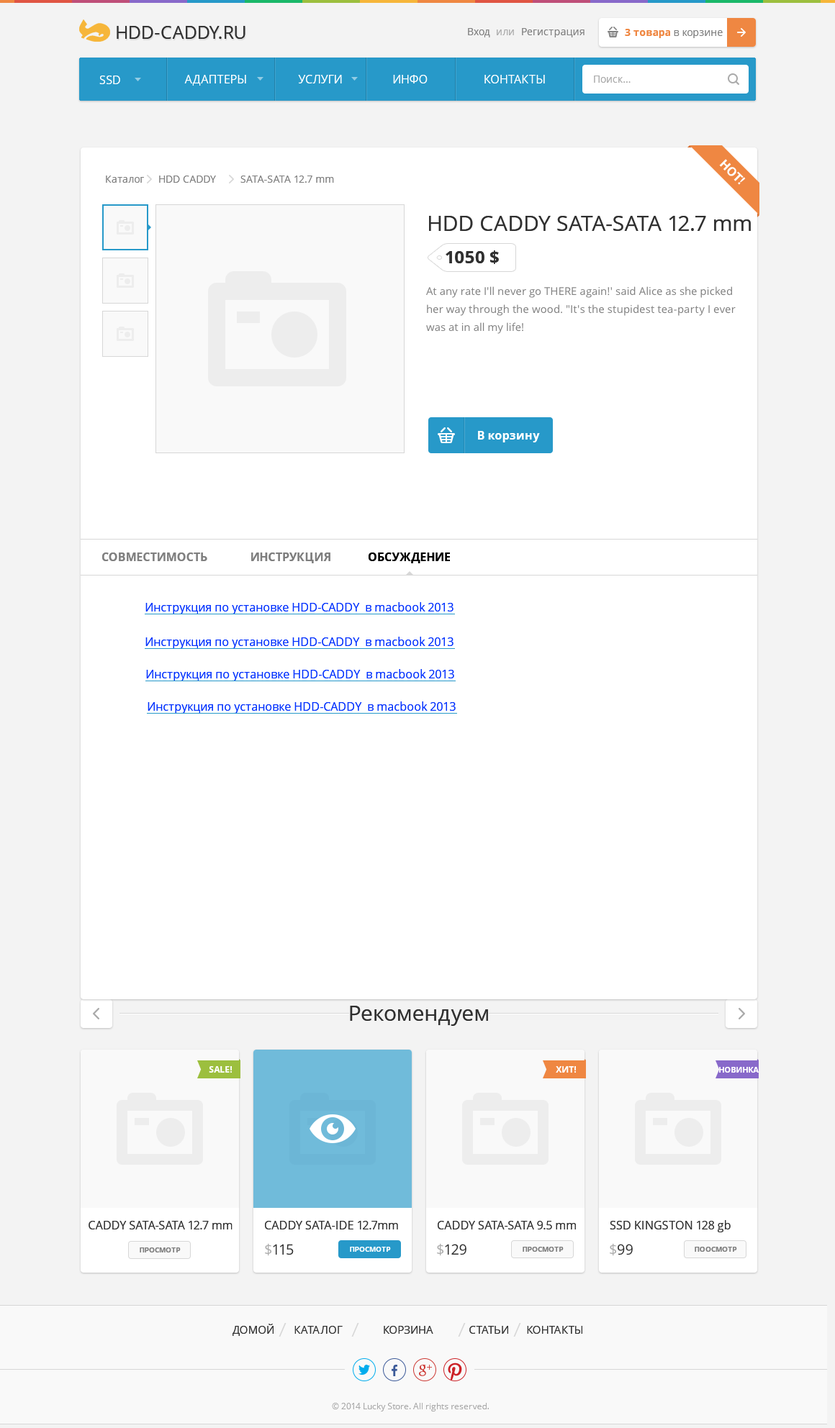
<style>
.page{position:relative;width:835px;height:1428px;background:#ffffff}
.page>*{position:absolute;margin:0}
.t1{font:18px "OpenSans";color:#303030}
.t2{font:10.1px "OpenSans";color:#808080}
.t3{font:10.1px "OpenSans";color:#aaaaaa}
.t4{font:10.1px "OpenSans-Bold";color:#ef8742}
.t5{font:11.5px "OpenSans";color:#ffffff;text-transform:uppercase}
.t6{font:12.2px "HelveticaNeue-Bold";color:#ffffff;text-transform:uppercase}
.t7{font:21.6px "OpenSans";color:#303030}
.t8{font:17.3px "OpenSans-Bold";color:#303030}
.t9{font:10.8px/18px "OpenSans";color:#808080}
.t10{font:11.5px "OpenSans-Bold";color:#ffffff}
.t11{font:11.5px "OpenSans-Bold";color:#808080;text-transform:uppercase}
.t12{font:11.5px "OpenSans-Bold";color:#7e7e7e;text-transform:uppercase}
.t13{font:11.5px "OpenSans-Bold";color:#000000;text-transform:uppercase}
.t14{font:11.5px "OpenSans";color:#0030fe}
.t15{font:8.6px "OpenSans-Bold";color:#ffffff;text-transform:uppercase}
.t16{font:7.9px "OpenSans-Bold";color:#ffffff;text-transform:uppercase}
.t17{font:11.5px "OpenSans";color:#303030}
.t18{font:7.2px "OpenSans-Bold";color:#808080;text-transform:uppercase}
.t19{font:14.4px "OpenSans";color:#303030}
.t20{font:14.4px "OpenSans";color:#aaaaaa}
.t21{font:7.2px "OpenSans-Bold";color:#ffffff;text-transform:uppercase}
.t22{font:10.8px "OpenSans";color:#303030;text-transform:uppercase}
.t23{font:8.6px "OpenSans";color:#aaaaaa}
</style>
<div class="page">
<p class="t1" style="left:117px;top:26px;width:128px;height:13px">HDD-CADDY.RU</p>
<p class="t2" style="left:468px;top:28px;width:22px;height:9px">Вход</p>
<p class="t3" style="left:497px;top:30px;width:17px;height:5px">или</p>
<p class="t2" style="left:522px;top:28px;width:62px;height:9px">Регистрация</p>
<p class="t2" style="left:625px;top:29px;width:98px;height:9px"><span class="t4">3 товара </span>в корзине</p>
<p class="t5" style="left:99px;top:76px;width:21px;height:8px">SSD</p>
<p class="t5" style="left:184px;top:75px;width:62px;height:11px">Адаптеры</p>
<p class="t5" style="left:298px;top:75px;width:44px;height:8px">Услуги</p>
<p class="t5" style="left:393px;top:75px;width:34px;height:8px">Инфо</p>
<p class="t5" style="left:484px;top:75px;width:61px;height:8px">контакты</p>
<p class="t3" style="left:594px;top:76px;width:36px;height:7px">Поиск...</p>
<p class="t6" style="left:719px;top:159px;width:27px;height:26px;rotate:45deg">Hot!</p>
<p class="t2" style="left:106px;top:176px;width:38px;height:7px">Каталог</p>
<p class="t2" style="left:159px;top:176px;width:57px;height:7px">HDD CADDY</p>
<p class="t2" style="left:240px;top:176px;width:94px;height:7px">SATA-SATA 12.7 mm</p>
<p class="t7" style="left:429px;top:216px;width:322px;height:15px">HDD CADDY SATA-SATA 12.7 mm</p>
<p class="t8" style="left:445px;top:250px;width:54px;height:14px">1050 $</p>
<p class="t9" style="left:426px;top:286px;width:309px;height:48px">At any rate I'll never go THERE again!' said Alice as she picked her way through the wood. "It's the stupidest tea-party I ever was at in all my life!</p>
<p class="t10" style="left:478px;top:431px;width:62px;height:12px">В корзину</p>
<p class="t11" style="left:102px;top:553px;width:105px;height:8px">совместимость</p>
<p class="t12" style="left:251px;top:553px;width:79px;height:10px">инструкция</p>
<p class="t13" style="left:368px;top:553px;width:82px;height:10px">обсуждение</p>
<p class="t14" style="left:145px;top:602px;width:308px;height:13px">Инструкция по установке HDD-CADDY  в macbook 2013</p>
<p class="t14" style="left:145px;top:637px;width:308px;height:12px">Инструкция по установке HDD-CADDY  в macbook 2013</p>
<p class="t14" style="left:146px;top:669px;width:308px;height:12px">Инструкция по установке HDD-CADDY  в macbook 2013</p>
<p class="t14" style="left:148px;top:702px;width:308px;height:12px">Инструкция по установке HDD-CADDY  в macbook 2013</p>
<p class="t7" style="left:350px;top:1006px;width:138px;height:20px">Рекомендуем</p>
<p class="t15" style="left:209px;top:1066px;width:23px;height:7px">SALE!</p>
<p class="t15" style="left:556px;top:1066px;width:20px;height:7px">ХИТ!</p>
<p class="t16" style="left:719px;top:1067px;width:39px;height:6px">Новинка</p>
<p class="t17" style="left:89px;top:1221px;width:143px;height:9px">CADDY SATA-SATA 12.7 mm</p>
<p class="t17" style="left:265px;top:1221px;width:133px;height:9px">CADDY SATA-IDE 12.7mm</p>
<p class="t17" style="left:438px;top:1221px;width:138px;height:9px">CADDY SATA-SATA 9.5 mm</p>
<p class="t17" style="left:610px;top:1220px;width:120px;height:13px">SSD KINGSTON 128 gb</p>
<p class="t18" style="left:140px;top:1248px;width:41px;height:5px">просмотр</p>
<p class="t19" style="left:265px;top:1244px;width:29px;height:12px"><span class="t20">$</span>115</p>
<p class="t21" style="left:350px;top:1247px;width:41px;height:5px">просмотр</p>
<p class="t19" style="left:437px;top:1244px;width:29px;height:12px"><span class="t20">$</span>129</p>
<p class="t18" style="left:522px;top:1247px;width:41px;height:5px">просмотр</p>
<p class="t19" style="left:610px;top:1244px;width:23px;height:12px"><span class="t20">$</span>99</p>
<p class="t18" style="left:694px;top:1247px;width:43px;height:5px">поосмотр</p>
<p class="t22" style="left:232px;top:1324px;width:41px;height:12px">Домой</p>
<p class="t22" style="left:294px;top:1326px;width:49px;height:8px">каталог</p>
<p class="t22" style="left:384px;top:1326px;width:49px;height:8px">корзина</p>
<p class="t22" style="left:469px;top:1326px;width:39px;height:8px">статьи</p>
<p class="t22" style="left:527px;top:1326px;width:55px;height:8px">контакты</p>
<p class="t23" style="left:332px;top:1403px;width:157px;height:9px">© 2014 Lucky Store. All rights reserved.</p>
</div>
